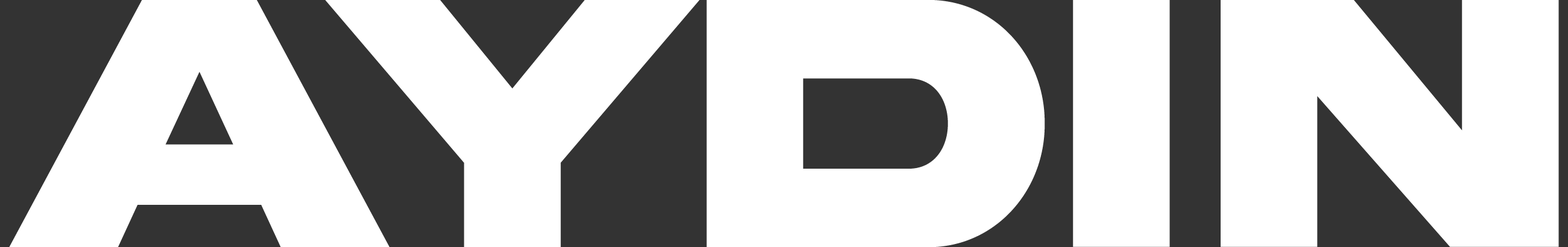
<style>
.page{position:relative;width:1568px;height:247px;background:#ffffff}
.page>*{position:absolute;margin:0}
.t1{font:376.9px "AkiraExpanded-SuperBold";color:#ffffff}
</style>
<div class="page">
<p class="t1" style="left:9px;top:0px;width:1550px;height:248px">AyDIN</p>
</div>
